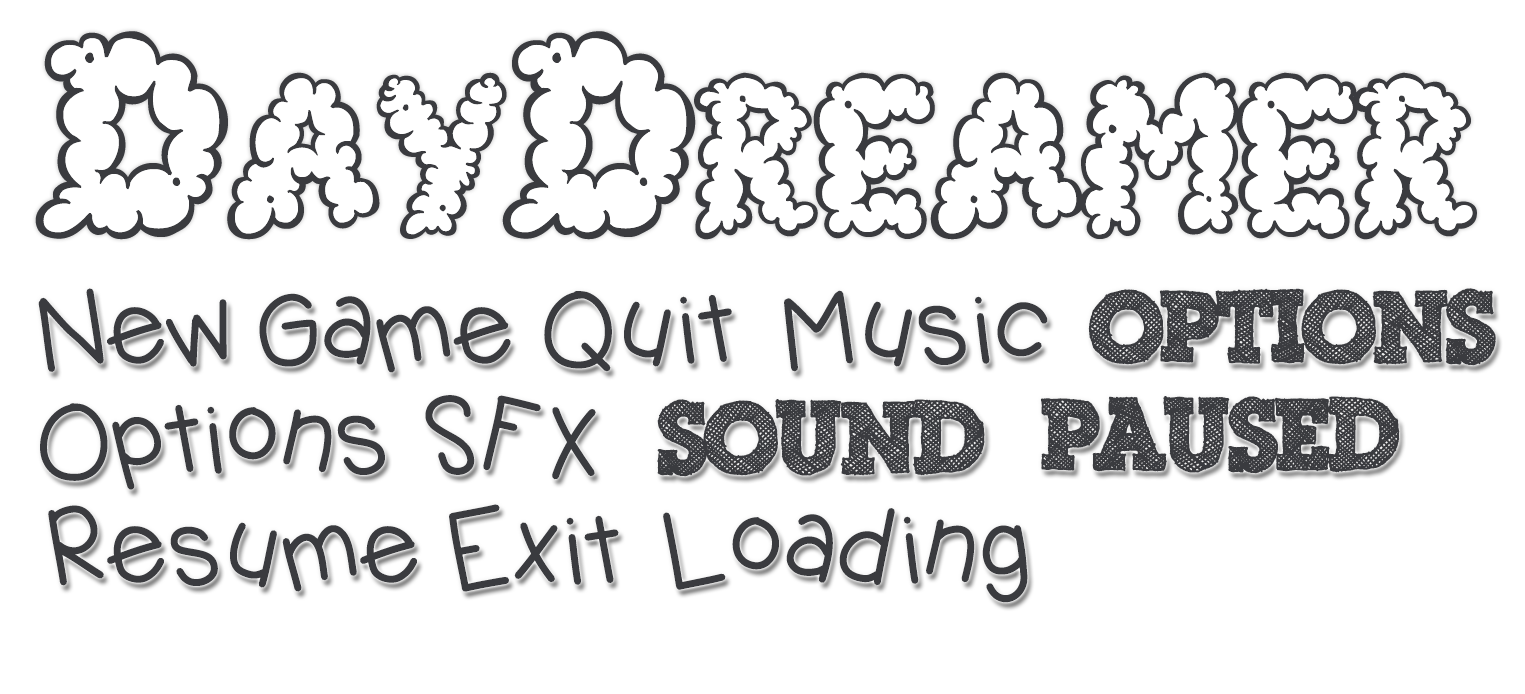
<style>
.page{position:relative;width:1525px;height:694px;background:#ffffff}
.page>*{position:absolute;margin:0}
.t1{font:99.6px "KBJellybean";letter-spacing:-0.04em;color:#3a3b3f}
.t2{font:99.6px "ScribbleBoxDEMO";letter-spacing:-0.04em;color:#3a3b3f}
</style>
<div class="page">
<p class="t1" style="left:38px;top:288px;width:473px;height:85px">New Game</p>
<p class="t1" style="left:544px;top:291px;width:188px;height:81px">Quit</p>
<p class="t1" style="left:784px;top:290px;width:264px;height:82px">Music</p>
<p class="t2" style="left:1088px;top:288px;width:408px;height:78px">Options</p>
<p class="t1" style="left:425px;top:395px;width:171px;height:85px">SFX</p>
<p class="t2" style="left:657px;top:399px;width:328px;height:78px">SOUND</p>
<p class="t2" style="left:1040px;top:396px;width:360px;height:78px">PauseD</p>
<p class="t1" style="left:40px;top:403px;width:345px;height:87px">Options</p>
<p class="t1" style="left:48px;top:505px;width:369px;height:87px">Resume</p>
<p class="t1" style="left:449px;top:504px;width:170px;height:88px">Exit</p>
<p class="t1" style="left:663px;top:508px;width:365px;height:95px">Loading</p>
</div>
